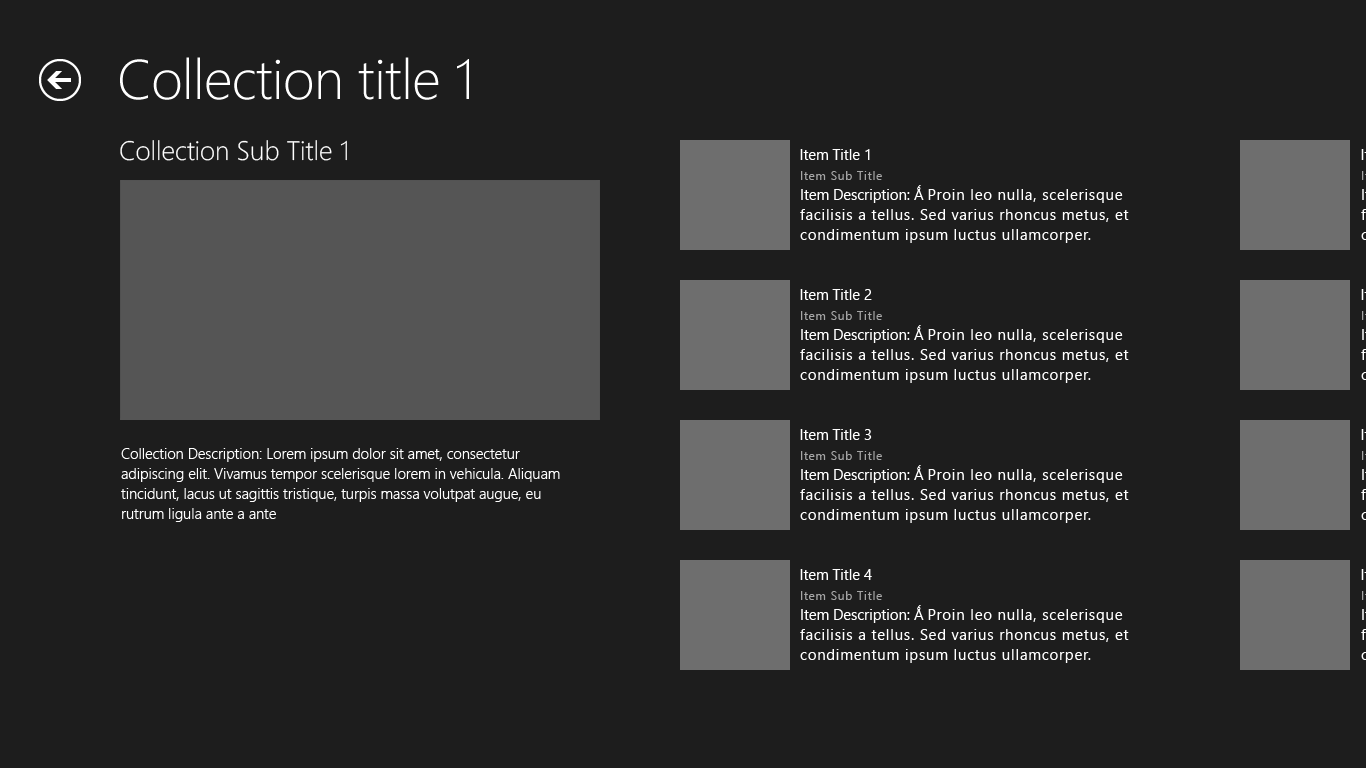
<style>
.page{position:relative;width:1366px;height:768px;background:#1d1d1d}
.page>*{position:absolute;margin:0}
.t1{font:56px "SegoeUI-Light";letter-spacing:-0.01em;color:#ffffff}
.t2{font:26.7px "SegoeUI-Light";color:#ffffff}
.t3{font:14.7px "SegoeUI";color:#ffffff}
.t4{font:12px "SegoeUI";letter-spacing:0.06em;color:#a5a5a5}
.t5{font:14.7px/20px "SegoeUI";letter-spacing:0.06em;color:#ffffff}
.t6{font:14.7px/20px "SegoeUI";color:#ffffff}
.t7{font:14.7px/20px "SegoeUI-Semilight";color:#ffffff}
</style>
<div class="page">
<p class="t1" style="left:120px;top:57px;width:349px;height:43px">Collection title 1</p>
<p class="t2" style="left:120px;top:140px;width:227px;height:21px">Collection Sub Title 1</p>
<p class="t3" style="left:800px;top:149px;width:70px;height:11px">Item Title 1</p>
<p class="t4" style="left:801px;top:171px;width:81px;height:9px">Item Sub Title</p>
<p class="t5" style="left:800px;top:185px;width:329px;height:58px"><span class="t6">Item Description: Ǻ </span>Proin leo nulla, scelerisque<br>facilisis a tellus. Sed varius rhoncus metus, et <br>condimentum ipsum luctus ullamcorper.</p>
<p class="t3" style="left:800px;top:289px;width:72px;height:11px">Item Title 2</p>
<p class="t4" style="left:801px;top:311px;width:81px;height:9px">Item Sub Title</p>
<p class="t5" style="left:800px;top:325px;width:329px;height:58px"><span class="t6">Item Description: Ǻ </span>Proin leo nulla, scelerisque<br>facilisis a tellus. Sed varius rhoncus metus, et <br>condimentum ipsum luctus ullamcorper.</p>
<p class="t3" style="left:800px;top:429px;width:72px;height:11px">Item Title 3</p>
<p class="t7" style="left:121px;top:448px;width:439px;height:74px">Collection Description: Lorem ipsum dolor sit amet, consectetur adipiscing elit. Vivamus tempor scelerisque lorem in vehicula. Aliquam tincidunt, lacus ut sagittis tristique, turpis massa volutpat augue, eu rutrum ligula ante a ante</p>
<p class="t4" style="left:801px;top:451px;width:81px;height:9px">Item Sub Title</p>
<p class="t5" style="left:800px;top:465px;width:329px;height:58px"><span class="t6">Item Description: Ǻ </span>Proin leo nulla, scelerisque<br>facilisis a tellus. Sed varius rhoncus metus, et <br>condimentum ipsum luctus ullamcorper.</p>
<p class="t3" style="left:800px;top:569px;width:72px;height:11px">Item Title 4</p>
<p class="t4" style="left:801px;top:591px;width:81px;height:9px">Item Sub Title</p>
<p class="t5" style="left:800px;top:605px;width:329px;height:58px"><span class="t6">Item Description: Ǻ </span>Proin leo nulla, scelerisque<br>facilisis a tellus. Sed varius rhoncus metus, et <br>condimentum ipsum luctus ullamcorper.</p>
</div>
